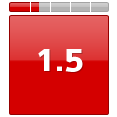
<style>
.page{position:relative;width:117px;height:117px;background:#d40000}
.page>*{position:absolute;margin:0}
.t1{font:36px "Colaborate-Bold";color:#ffffff;text-transform:uppercase}
</style>
<div class="page">
<p class="t1" style="left:38px;top:49px;width:45px;height:23px">1.5</p>
</div>
